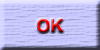
<style>
.page{position:relative;width:100px;height:50px}
.page>*{position:absolute;margin:0}
.t1{font:18px "Arial-BoldMT"}
</style>
<div class="page">
<p class="t1" style="left:36px;top:18px;width:27px;height:15px">OK</p>
</div>
